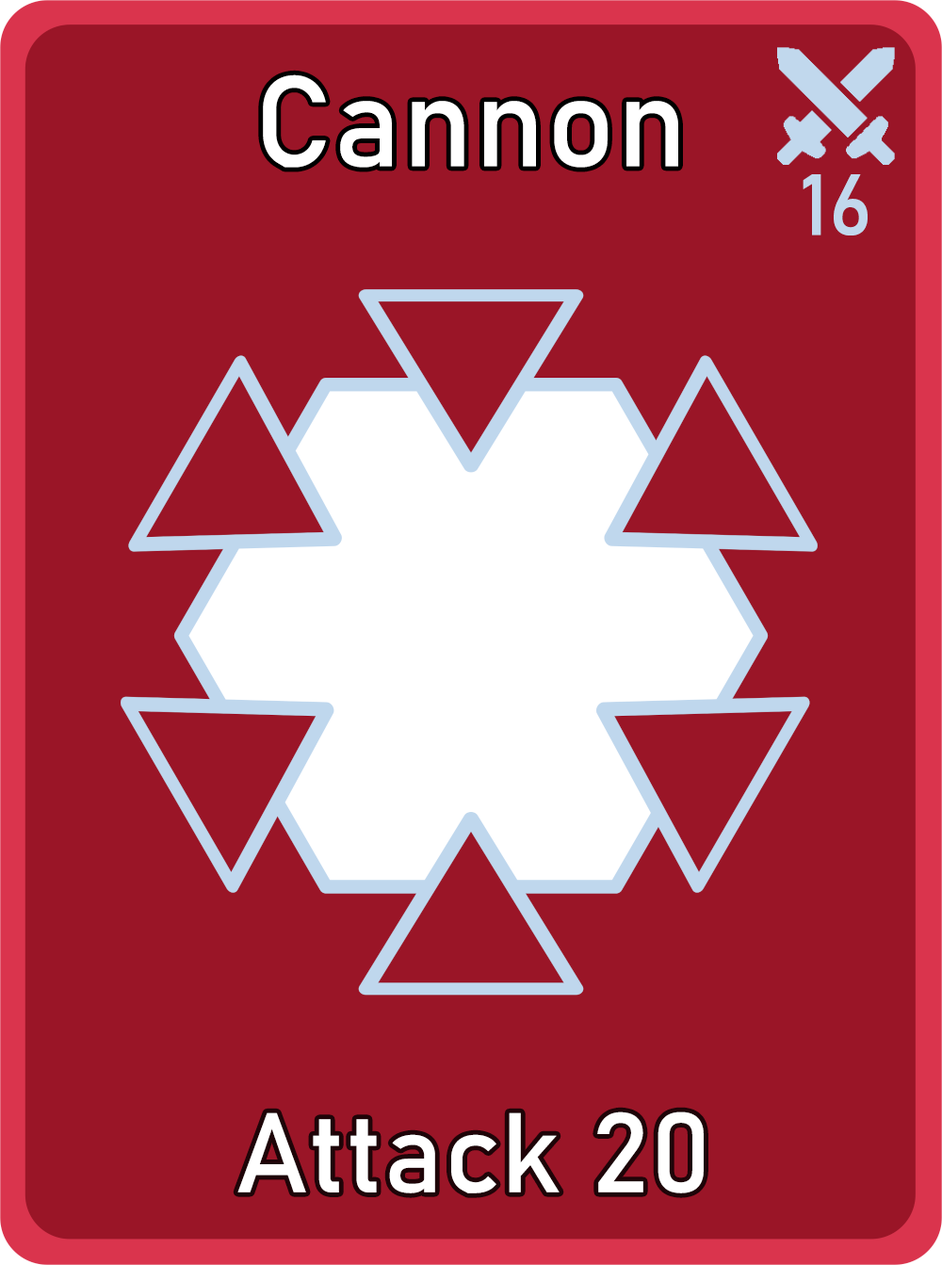
<style>
.page{position:relative;width:942px;height:1265px;background:#9a1527}
.page>*{position:absolute;margin:0}
.t1{font:126.7px "Bahnschrift";letter-spacing:0.01em;color:#ffffff}
.t2{font:85px "Bahnschrift";letter-spacing:0.01em;color:#c1d8ed}
.t3{font:111.3px "Bahnschrift";letter-spacing:0.01em;color:#ffffff}
</style>
<div class="page">
<p class="t1" style="left:263px;top:74px;width:415px;height:94px">Cannon</p>
<p class="t2" style="left:803px;top:174px;width:65px;height:62px">16</p>
<p class="t3" style="left:237px;top:1112px;width:467px;height:82px">Attack 20</p>
</div>
